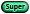
<style>
.page{position:relative;width:30px;height:14px;background:#ffffff}
.page>*{position:absolute;margin:0}
.t1{font:8px "Calibri-Bold";color:#000000}
</style>
<div class="page">
<p class="t1" style="left:5px;top:4px;width:20px;height:7px">Super</p>
</div>
